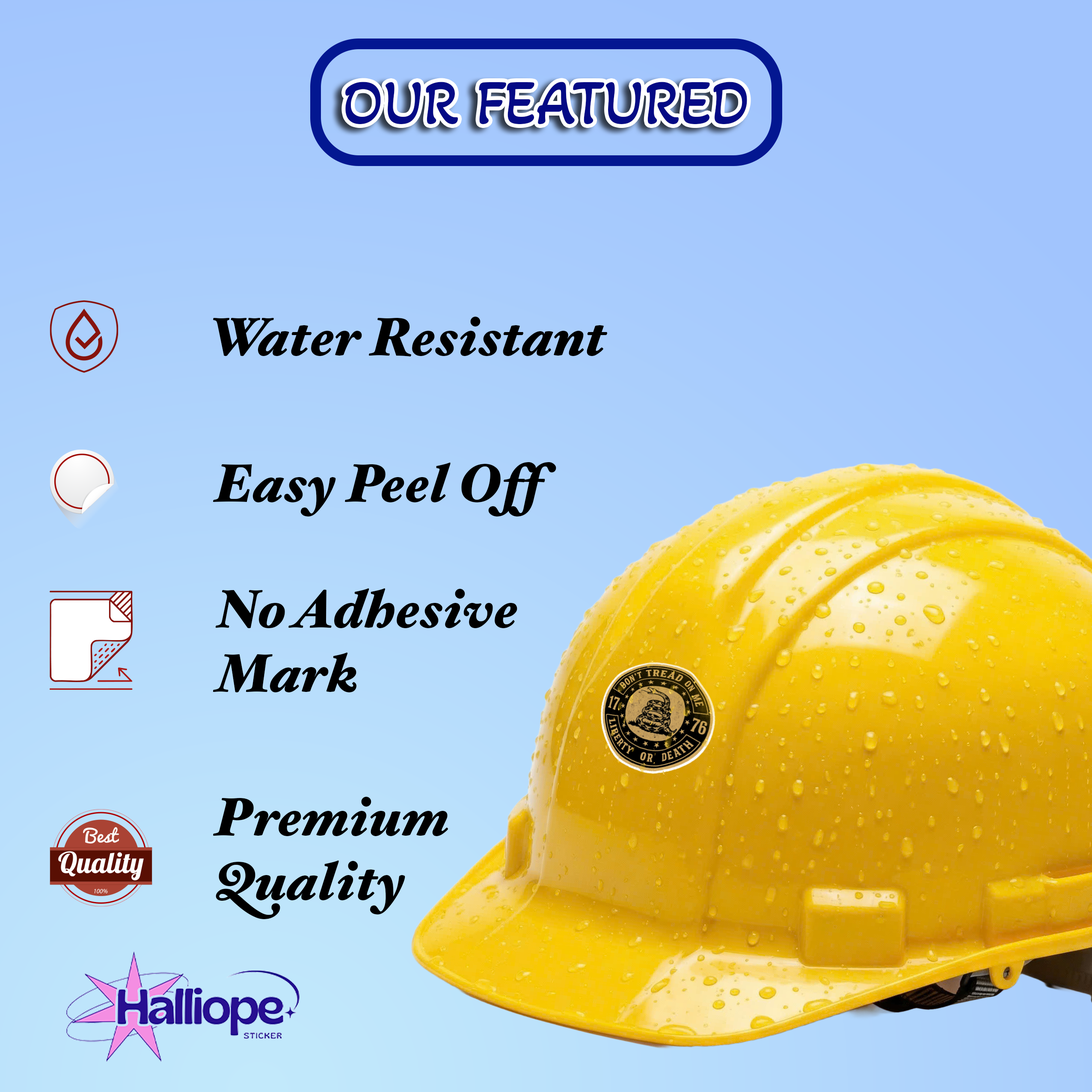
<style>
.page{position:relative;width:1092px;height:1092px}
.page>*{position:absolute;margin:0}
.t1{font:64.2px "AkayaKanadaka-Regular";color:#040a85}
.t2{font:53.5px "HoeflerText-BlackItalic";color:#000000}
</style>
<div class="page">
<p class="t1" style="left:345px;top:82px;width:402px;height:42px">OUR FEATURED</p>
<p class="t2" style="left:213px;top:317px;width:394px;height:39px">Water Resistant</p>
<p class="t2" style="left:213px;top:462px;width:343px;height:54px">Easy Peel Off</p>
<p class="t2" style="left:213px;top:588px;width:304px;height:104px">No Adhesive<br>Mark</p>
<p class="t2" style="left:213px;top:797px;width:235px;height:122px">Premium<br>Quality</p>
</div>
